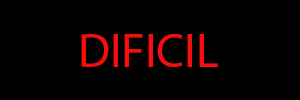
<style>
.page{position:relative;width:300px;height:100px;background:#000000}
.page>*{position:absolute;margin:0}
.t1{font:48px "MyriadHebrew-Regular";color:#f80c0c}
</style>
<div class="page">
<p class="t1" style="left:81px;top:34px;width:137px;height:33px">DIFICIL</p>
</div>
